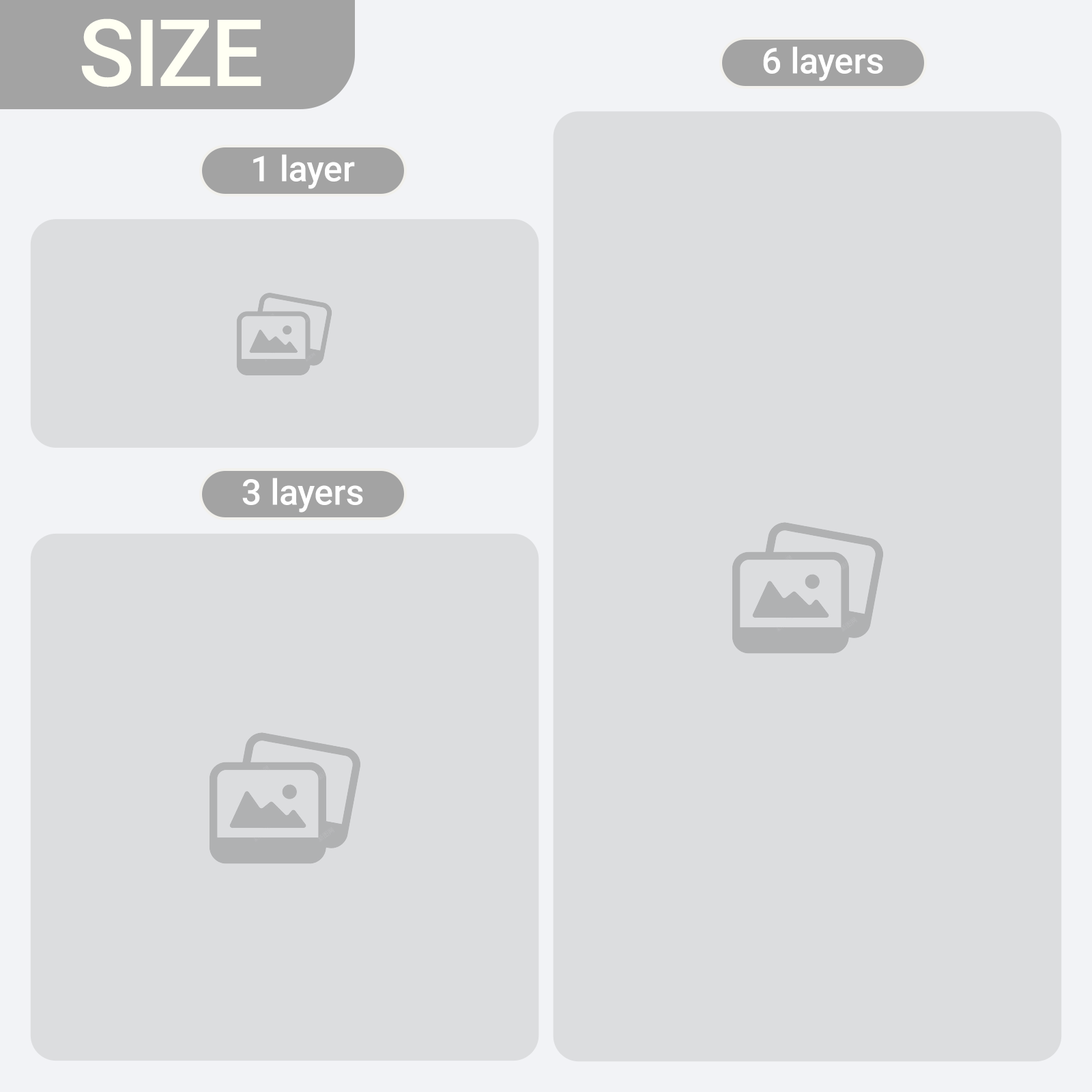
<style>
.page{position:relative;width:1092px;height:1092px;background:#dcdddf}
.page>*{position:absolute;margin:0}
.t1{font:92.8px "Roboto-Medium";color:#fffff3}
.t2{font:35.5px "Roboto-Medium";color:#ffffff}
</style>
<div class="page">
<p class="t1" style="left:81px;top:18px;width:180px;height:69px">SIZE</p>
<p class="t2" style="left:763px;top:46px;width:120px;height:35px">6 layers</p>
<p class="t2" style="left:253px;top:154px;width:102px;height:35px">1 layer</p>
<p class="t2" style="left:242px;top:478px;width:121px;height:35px">3 layers</p>
</div>
